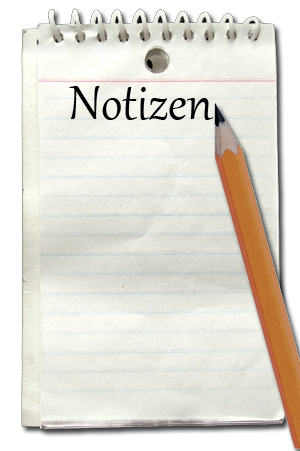
<style>
.page{position:relative;width:300px;height:451px}
.page>*{position:absolute;margin:0}
.t1{font:60px "Gabriola";color:#000000}
</style>
<div class="page">
<p class="t1" style="left:69px;top:86px;width:145px;height:34px">Notizen</p>
</div>
